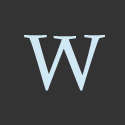
<style>
.page{position:relative;width:125px;height:125px;background:#333333}
.page>*{position:absolute;margin:0}
.t1{font:72px "CharlemagneStd-Regular";letter-spacing:0.005em;color:#d0e8f3;font-weight:bold}
</style>
<div class="page">
<p class="t1" style="left:24px;top:35px;width:81px;height:56px">w</p>
</div>
